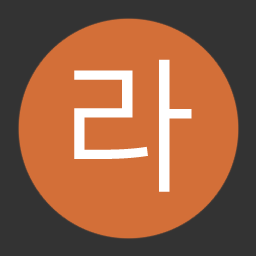
<style>
.page{position:relative;width:256px;height:256px;background:#d36f38}
.page>*{position:absolute;margin:0}
.t1{font:144px "NanumSquareOTFR";color:#ffffff}
</style>
<div class="page">
<p class="t1" style="left:74px;top:59px;width:118px;height:133px">라</p>
</div>
